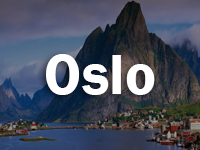
<style>
.page{position:relative;width:200px;height:150px}
.page>*{position:absolute;margin:0}
.t1{font:58.3px "FranklinGothic-Demi";color:#ffffff}
</style>
<div class="page">
<p class="t1" style="left:46px;top:54px;width:109px;height:41px">Oslo</p>
</div>
